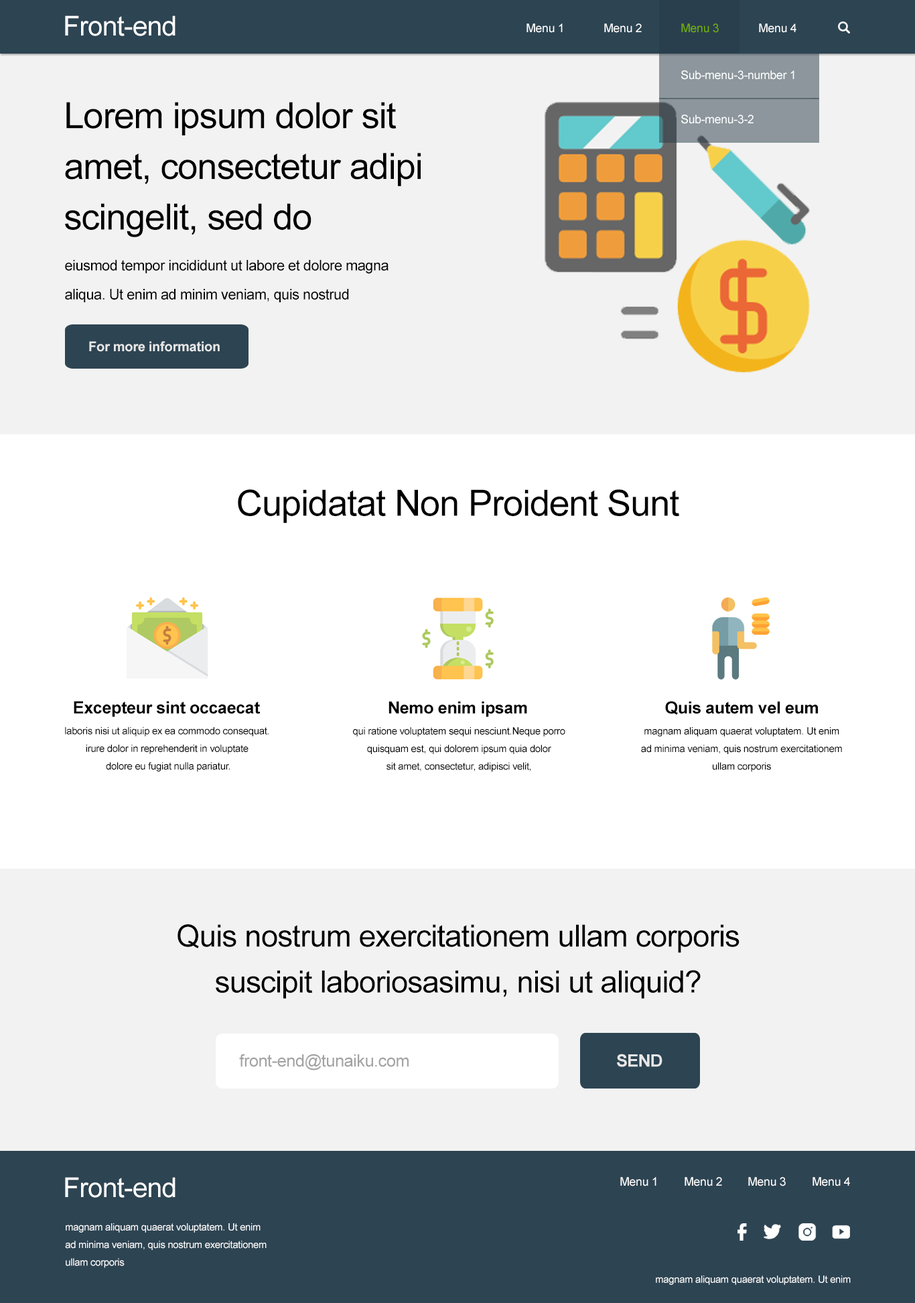
<style>
.page{position:relative;width:915px;height:1303px;background:#f2f2f2}
.page>*{position:absolute;margin:0}
.t1{font:27.2px "ArialMT";letter-spacing:-0.02em;color:#ffffff}
.t2{font:11.9px "ArialMT";letter-spacing:-0.02em;color:#ffffff}
.t3{font:11.9px "ArialMT";letter-spacing:-0.02em;color:#6fae08}
.t4{font:36.2px/50.7px "ArialMT";letter-spacing:-0.02em;color:#000000}
.t5{font:14.5px/29px "ArialMT";letter-spacing:-0.02em;color:#000000}
.t6{font:13.5px "Arial-BoldMT";letter-spacing:-0.02em;color:#e7e7e7}
.t7{font:36.2px "ArialMT";letter-spacing:-0.02em;color:#000000}
.t8{font:17px "Arial-BoldMT";letter-spacing:-0.02em;color:#000000}
.t9{font:16.8px "Arial-BoldMT";letter-spacing:-0.02em;color:#000000}
.t10{font:10px/17.6px "ArialMT";letter-spacing:-0.02em;color:#000000}
.t11{font:30.6px/45.9px "ArialMT";letter-spacing:-0.02em;color:#000000}
.t12{font:17px "ArialMT";letter-spacing:-0.02em;color:#a3a3a3}
.t13{font:17px "Arial-BoldMT";letter-spacing:-0.02em;color:#e7e7e7}
.t14{font:10px/17.6px "ArialMT";letter-spacing:-0.02em;color:#ffffff}
.t15{font:10px "ArialMT";letter-spacing:-0.02em;color:#ffffff}
</style>
<div class="page">
<p class="t1" style="left:65px;top:15px;width:111px;height:21px">Front-end</p>
<p class="t2" style="left:527px;top:23px;width:36px;height:10px">Menu 1</p>
<p class="t2" style="left:604px;top:23px;width:38px;height:10px">Menu 2</p>
<p class="t3" style="left:681px;top:23px;width:38px;height:10px">Menu 3</p>
<p class="t2" style="left:759px;top:23px;width:38px;height:10px">Menu 4</p>
<p class="t2" style="left:681px;top:70px;width:114px;height:10px">Sub-menu-3-number 1</p>
<p class="t4" style="left:65px;top:102px;width:356px;height:135px">Lorem ipsum dolor sit<br>amet, consectetur adipi<br>scingelit, sed do</p>
<p class="t2" style="left:681px;top:115px;width:73px;height:9px">Sub-menu-3-2</p>
<p class="t5" style="left:65px;top:259px;width:324px;height:43px">eiusmod tempor incididunt ut labore et dolore magna<br>aliqua. Ut enim ad minim veniam, quis nostrud</p>
<p class="t6" style="left:89px;top:341px;width:131px;height:11px">For more information</p>
<p class="t7" style="left:238px;top:489px;width:441px;height:34px">Cupidatat Non Proident Sunt</p>
<p class="t8" style="left:74px;top:701px;width:186px;height:16px">Excepteur sint occaecat</p>
<p class="t9" style="left:389px;top:701px;width:138px;height:16px">Nemo enim ipsam</p>
<p class="t9" style="left:665px;top:701px;width:153px;height:14px">Quis autem vel eum</p>
<p class="t10" style="left:65px;top:726px;width:204px;height:45px;text-align:center">laboris nisi ut aliquip ex ea commodo consequat. <br>irure dolor in reprehenderit in voluptate <br>dolore eu fugiat nulla pariatur.</p>
<p class="t10" style="left:353px;top:727px;width:213px;height:45px;text-align:center">qui ratione voluptatem sequi nesciunt.Neque porro<br>quisquam est, qui dolorem ipsum quia dolor<br>sit amet, consectetur, adipisci velit,</p>
<p class="t10" style="left:641px;top:727px;width:201px;height:45px;text-align:center">magnam aliquam quaerat voluptatem. Ut enim<br>ad minima veniam, quis nostrum exercitationem<br>ullam corporis</p>
<p class="t11" style="left:178px;top:924px;width:562px;height:74px;text-align:center">Quis nostrum exercitationem ullam corporis<br>suscipit laboriosasimu, nisi ut aliquid?</p>
<p class="t12" style="left:239px;top:1053px;width:170px;height:17px">front-end@tunaiku.com</p>
<p class="t13" style="left:617px;top:1053px;width:46px;height:14px">SEND</p>
<p class="t1" style="left:65px;top:1177px;width:111px;height:20px">Front-end</p>
<p class="t2" style="left:621px;top:1177px;width:36px;height:9px">Menu 1</p>
<p class="t2" style="left:685px;top:1177px;width:37px;height:9px">Menu 2</p>
<p class="t2" style="left:749px;top:1177px;width:37px;height:9px">Menu 3</p>
<p class="t2" style="left:813px;top:1177px;width:37px;height:9px">Menu 4</p>
<p class="t14" style="left:65px;top:1223px;width:202px;height:45px">magnam aliquam quaerat voluptatem. Ut enim<br>ad minima veniam, quis nostrum exercitationem<br>ullam corporis</p>
<p class="t15" style="left:656px;top:1275px;width:195px;height:10px">magnam aliquam quaerat voluptatem. Ut enim</p>
</div>
